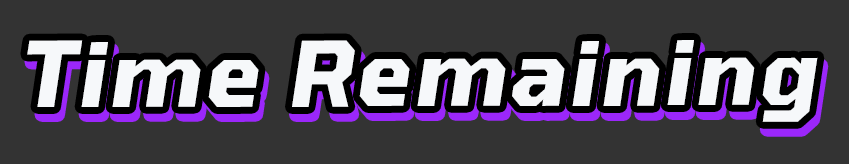
<style>
.page{position:relative;width:849px;height:164px;background:#333333}
.page>*{position:absolute;margin:0}
.t1{font:89.9px "Tomorrow-BoldItalic";letter-spacing:0.04em;color:#f6f8fa}
</style>
<div class="page">
<p class="t1" style="left:27px;top:40px;width:791px;height:82px">Time Remaining</p>
</div>
